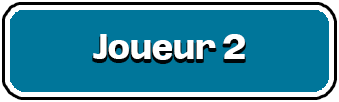
<style>
.page{position:relative;width:339px;height:102px;background:#00769a}
.page>*{position:absolute;margin:0}
.t1{font:33.8px "Oddlini-ExtraBold";color:#ffffff}
</style>
<div class="page">
<p class="t1" style="left:93px;top:34px;width:152px;height:26px">Joueur 2</p>
</div>
